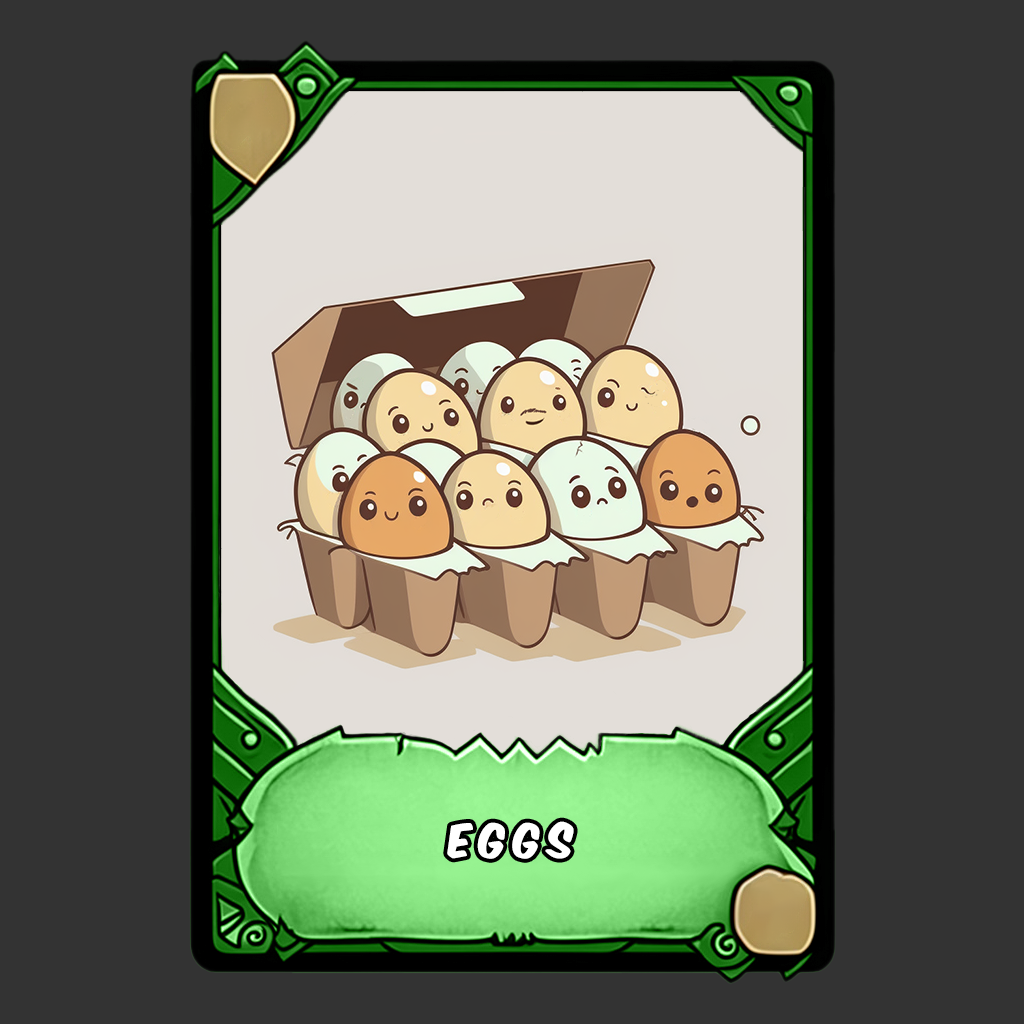
<style>
.page{position:relative;width:1024px;height:1024px;background:#333333}
.page>*{position:absolute;margin:0}
.t1{font:40px "KomikaAxis";letter-spacing:0.2em;color:#ffffff}
</style>
<div class="page">
<p class="t1" style="left:447px;top:821px;width:127px;height:38px">eggs</p>
</div>
